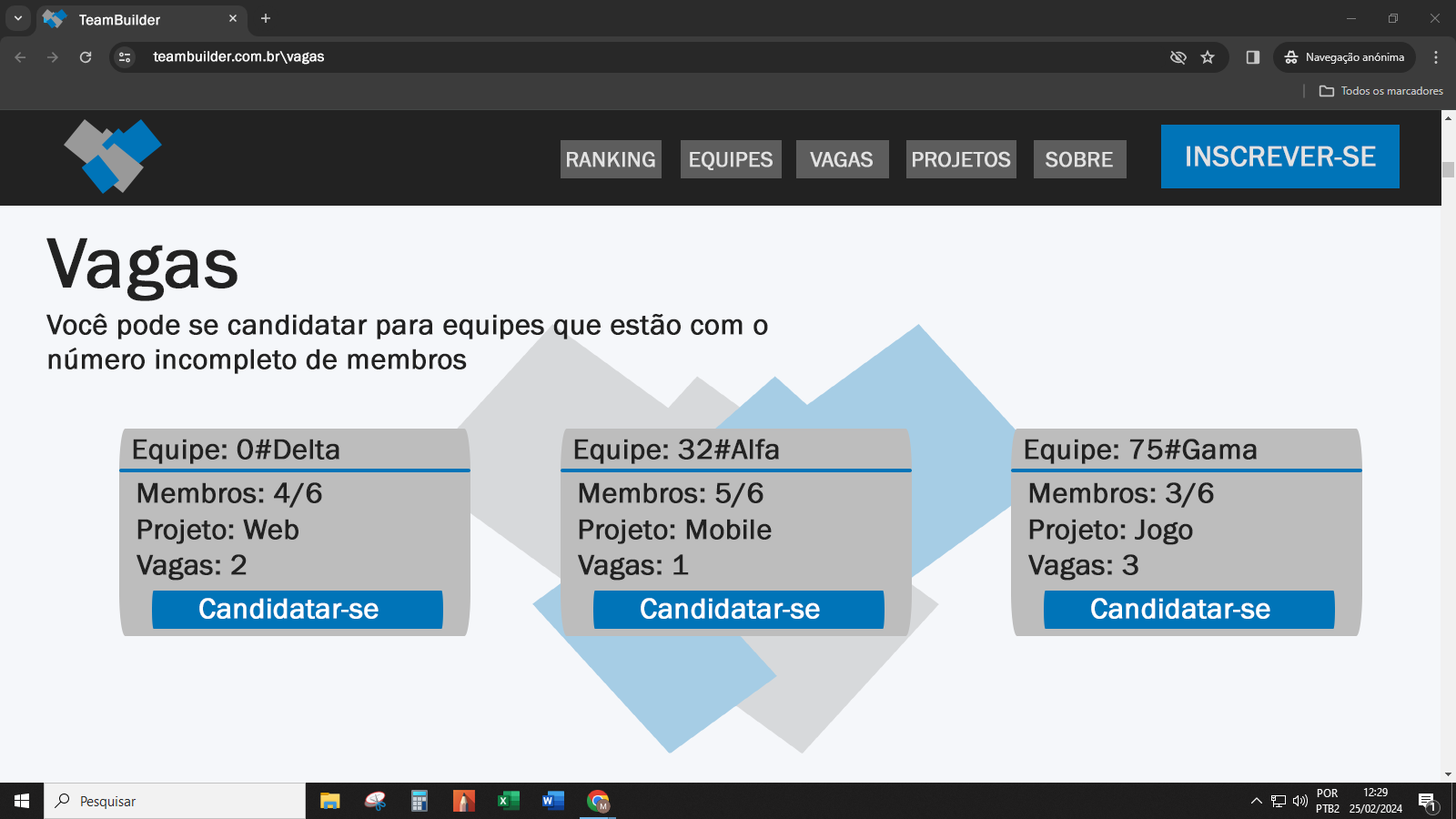
<style>
.page{position:relative;width:1456px;height:819px;background:#f5f7fa}
.page>*{position:absolute;margin:0}
.t1{font:10.9px "FranklinGothic-Book";color:#ffffff;font-weight:bold}
.t2{font:14.6px "FranklinGothic-Book";color:#ffffff;font-weight:bold}
.t3{font:29.1px "FranklinGothic-Book";color:#e2e2e2;font-weight:bold}
.t4{font:21.8px "FranklinGothic-Book";color:#e2e2e2;font-weight:bold}
.t5{font:72.8px "FranklinGothic-Book";color:#222222;font-weight:bold}
.t6{font:29.1px "FranklinGothic-Book";color:#222222;font-weight:bold}
.t7{font:29.1px "FranklinGothic-Book";color:#ffffff;font-weight:bold}
</style>
<div class="page">
<p class="t1" style="left:79px;top:15px;width:81px;height:10px">TeamBuilder</p>
<p class="t2" style="left:153px;top:51px;width:171px;height:14px">teambuilder.com.br\vagas</p>
<p class="t3" style="left:1187px;top:146px;width:189px;height:21px">INSCREVER-SE</p>
<p class="t4" style="left:567px;top:151px;width:88px;height:16px">RANKING</p>
<p class="t4" style="left:690px;top:151px;width:83px;height:19px">EQUIPES</p>
<p class="t4" style="left:810px;top:151px;width:63px;height:16px">VAGAS</p>
<p class="t4" style="left:913px;top:151px;width:98px;height:16px">PROJETOS</p>
<p class="t4" style="left:1046px;top:151px;width:67px;height:16px">SOBRE</p>
<p class="t5" style="left:46px;top:238px;width:192px;height:63px">Vagas</p>
<p class="t6" style="left:46px;top:313px;width:722px;height:61px">Você pode se candidatar para equipes que estão com o número incompleto de membros</p>
<p class="t6" style="left:133px;top:439px;width:206px;height:25px">Equipe: 0#Delta</p>
<p class="t6" style="left:574px;top:439px;width:205px;height:25px">Equipe: 32#Alfa</p>
<p class="t6" style="left:1025px;top:439px;width:232px;height:25px">Equipe: 75#Gama</p>
<p class="t6" style="left:137px;top:482px;width:185px;height:26px">Membros: 4/6</p>
<p class="t6" style="left:579px;top:482px;width:184px;height:26px">Membros: 5/6</p>
<p class="t6" style="left:1029px;top:482px;width:185px;height:26px">Membros: 3/6</p>
<p class="t6" style="left:137px;top:519px;width:161px;height:25px">Projeto: Web</p>
<p class="t6" style="left:579px;top:519px;width:193px;height:25px">Projeto: Mobile</p>
<p class="t6" style="left:1029px;top:519px;width:164px;height:26px">Projeto: Jogo</p>
<p class="t6" style="left:136px;top:554px;width:111px;height:27px">Vagas: 2</p>
<p class="t6" style="left:578px;top:554px;width:111px;height:27px">Vagas: 1</p>
<p class="t6" style="left:1028px;top:554px;width:110px;height:27px">Vagas: 3</p>
<p class="t7" style="left:199px;top:598px;width:180px;height:21px">Candidatar-se</p>
<p class="t7" style="left:641px;top:598px;width:179px;height:21px">Candidatar-se</p>
<p class="t7" style="left:1091px;top:598px;width:179px;height:21px">Candidatar-se</p>
</div>
